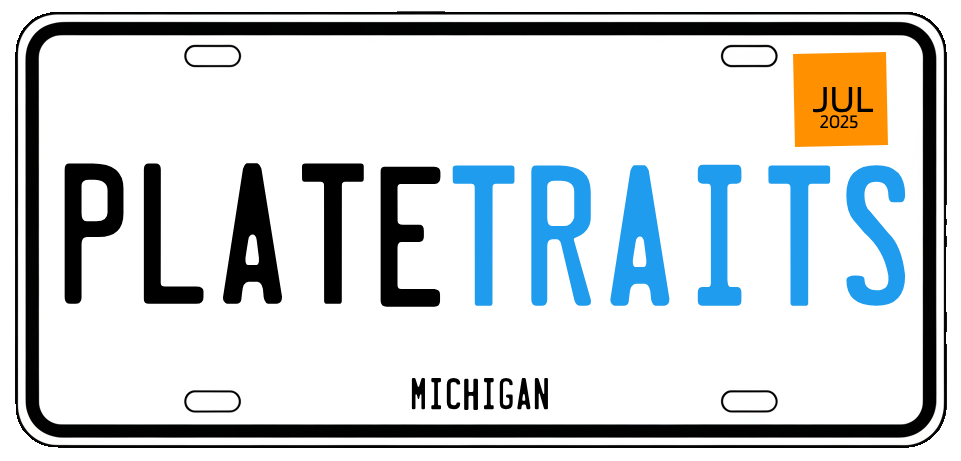
<style>
.page{position:relative;width:961px;height:461px;background:#ffffff}
.page>*{position:absolute;margin:0}
.t1{font:40px "Blinker-Regular";color:#000000}
.t2{font:20px "Blinker-Regular";color:#000000}
.t3{font:180px "LicensePlate";color:#000000}
.t4{font:180px "LicensePlate";color:#209cee}
.t5{font:40px "LicensePlate";color:#000000}
</style>
<div class="page">
<p class="t1" style="left:813px;top:86px;width:61px;height:27px">JUL</p>
<p class="t2" style="left:820px;top:115px;width:38px;height:14px">2025</p>
<p class="t3" style="left:64px;top:163px;width:377px;height:144px">Plate</p>
<p class="t4" style="left:452px;top:164px;width:454px;height:142px">traits</p>
<p class="t5" style="left:411px;top:377px;width:137px;height:33px">michigan</p>
</div>
